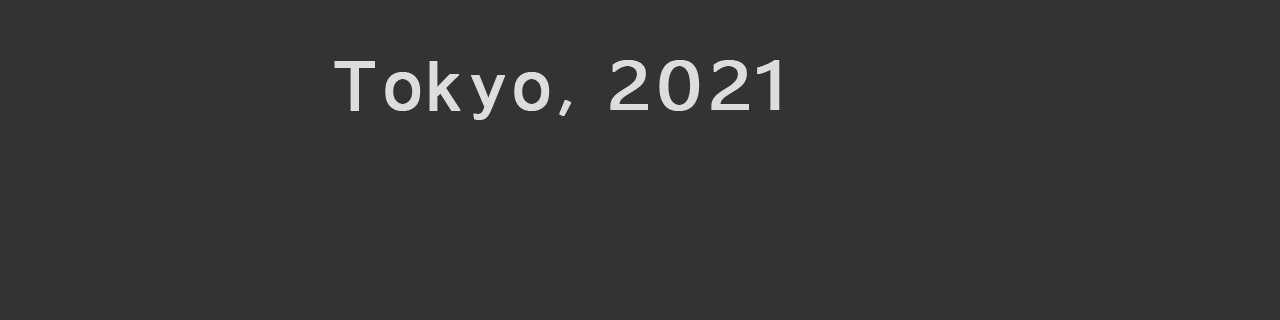
<style>
.page{position:relative;width:1280px;height:320px;background:#333333}
.page>*{position:absolute;margin:0}
.t1{font:68px "ArialMT";letter-spacing:0.095em;color:#dddddd;font-weight:bold}
.t2{font:68px "ArialMT";letter-spacing:0.04em;color:#dddddd;font-weight:bold}
.t3{font:68px "ArialMT";letter-spacing:0.125em;color:#dddddd;font-weight:bold}
.t4{font:61.2px "ArialMT";letter-spacing:0.1em;color:#dddddd;font-weight:bold;scale:1.11 1}
.t5{font:68px "ArialMT";letter-spacing:0.045em;color:#dddddd;font-weight:bold}
.t6{font:68px "CenturyGothic";letter-spacing:0.075em;color:#dddddd;font-weight:bold}
.t7{font:68px "SegoeUI";letter-spacing:0.04em;color:#dddddd;font-weight:bold;scale:1.2 1}
.t8{font:68px "SegoeUI";letter-spacing:0.06em;color:#dddddd;font-weight:bold;scale:1.2 1}
.t9{font:68px "SegoeUI";letter-spacing:-0.06em;color:#dddddd;font-weight:bold;scale:1.2 1}
.t10{font:68px "SegoeUI";letter-spacing:0.02em;color:#dddddd;font-weight:bold;scale:1.2 1}
</style>
<div class="page">
<p class="t1" style="left:334px;top:60px;width:446px;height:60px">T<span class="t2">o</span><span class="t3">k</span><span class="t4">y</span><span class="t5">o</span><span class="t6">, </span><span class="t7">2</span><span class="t8">0</span><span class="t9">2</span><span class="t10">1</span></p>
</div>
